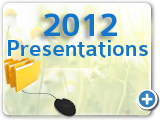
<style>
.page{position:relative;width:160px;height:120px}
.page>*{position:absolute;margin:0}
.t1{font:36px "Colaborate-Medium";letter-spacing:-0.01em;color:#1376cc}
.t2{font:36px "Colaborate-Medium";letter-spacing:-0.025em;color:#1376cc}
.t3{font:24px "Colaborate-Medium";color:#1376cc}
</style>
<div class="page">
<p class="t1" style="left:43px;top:13px;width:74px;height:23px">20<span class="t2">1</span>2</p>
<p class="t3" style="left:8px;top:40px;width:140px;height:18px">Presentations</p>
</div>
